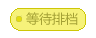
<style>
.page{position:relative;width:96px;height:38px;background:#ffffff}
.page>*{position:absolute;margin:0}
.t1{font:13px "MicrosoftYaHei";color:#a5a236;text-transform:uppercase}
</style>
<div class="page">
<p class="t1" style="left:26px;top:12px;width:52px;height:13px">等待排档</p>
</div>
